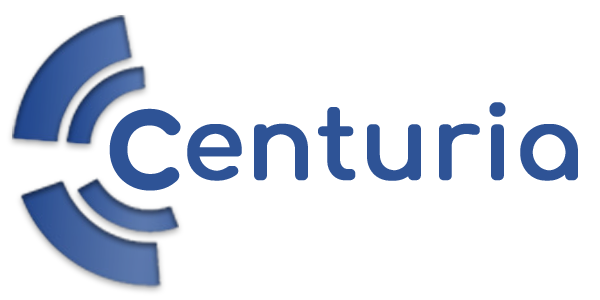
<style>
.page{position:relative;width:600px;height:300px;background:#ffffff}
.page>*{position:absolute;margin:0}
.t1{font:100px "Comfortaa-Bold";color:#2e5396;font-weight:bold}
.t2{font:140px "Comfortaa-Bold";color:#2e5396;font-weight:bold}
</style>
<div class="page">
<p class="t1" style="left:187px;top:102px;width:391px;height:79px">enturia</p>
<p class="t2" style="left:109px;top:108px;width:72px;height:83px">c</p>
</div>
